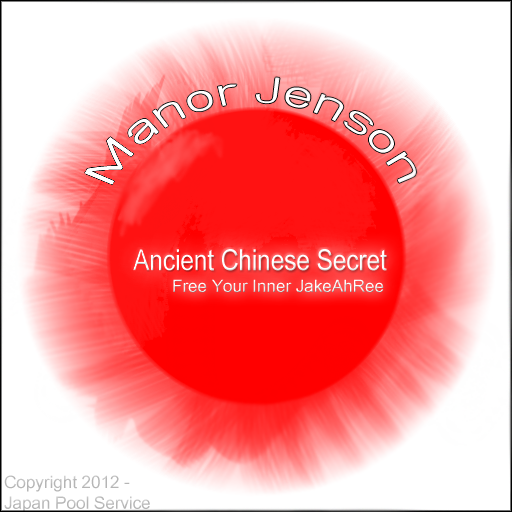
<style>
.page{position:relative;width:512px;height:512px;background:#ffffff}
.page>*{position:absolute;margin:0}
.t1{font:17.4px "DokChampa";letter-spacing:-0.01em;color:#ffffff}
.t2{font:17.4px "DokChampa";letter-spacing:-0.01em;color:#b5b5b5}
</style>
<div class="page">
<p class="t1" style="left:173px;top:279px;width:211px;height:14px">Free Your Inner JakeAhRee</p>
<p class="t2" style="left:4px;top:475px;width:146px;height:38px">Copyright 2012 -<br>Japan Pool Service</p>
</div>
